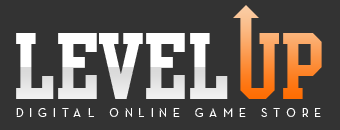
<style>
.page{position:relative;width:340px;height:130px;background:#333333}
.page>*{position:absolute;margin:0}
.t1{font:80px "PornStarAcademy";color:#f2f2f2}
.t2{font:12px "EarthMemory";letter-spacing:0.52em;color:#ffffff}
</style>
<div class="page">
<p class="t1" style="left:16px;top:33px;width:212px;height:66px">LEVEL</p>
<p class="t2" style="left:16px;top:108px;width:305px;height:9px">DIGITAL ONLINE GAME STORE</p>
</div>
